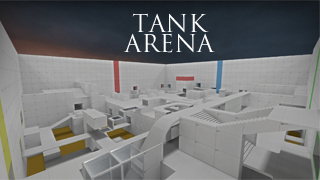
<style>
.page{position:relative;width:320px;height:180px}
.page>*{position:absolute;margin:0}
.t1{font:24px/20px "TrajanPro-Regular";color:#ffffff}
</style>
<div class="page">
<p class="t1" style="left:123px;top:13px;width:92px;height:40px;text-align:center">TANK<br>ARENA</p>
</div>
